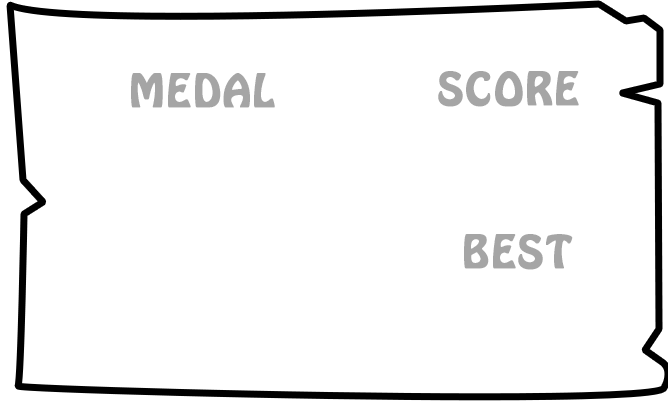
<style>
.page{position:relative;width:668px;height:407px;background:#ffffff}
.page>*{position:absolute;margin:0}
.t1{font:40px "HoboStd";letter-spacing:0.035em;color:#a5a5a5;font-weight:bold}
</style>
<div class="page">
<p class="t1" style="left:131px;top:73px;width:144px;height:35px">MEDAL</p>
<p class="t1" style="left:438px;top:71px;width:141px;height:36px">SCORE</p>
<p class="t1" style="left:464px;top:234px;width:109px;height:36px">BEST</p>
</div>
